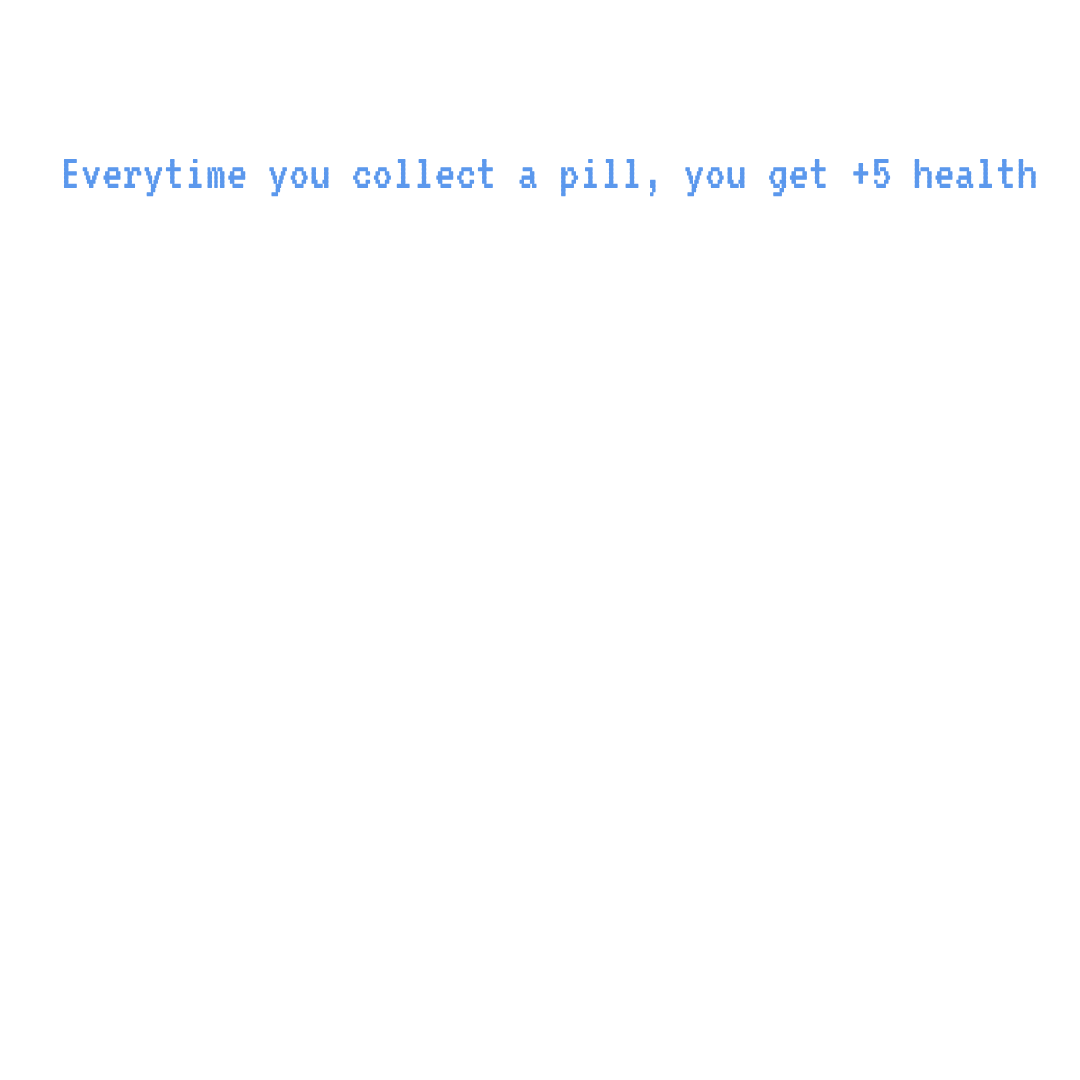
<style>
.page{position:relative;width:1080px;height:1080px;background:#ffffff}
.page>*{position:absolute;margin:0}
.t1{font:52px "VT323-Regular";color:#5b98ed}
</style>
<div class="page">
<p class="t1" style="left:63px;top:158px;width:973px;height:39px">Everytime you collect a pill, you get +5 health</p>
</div>
